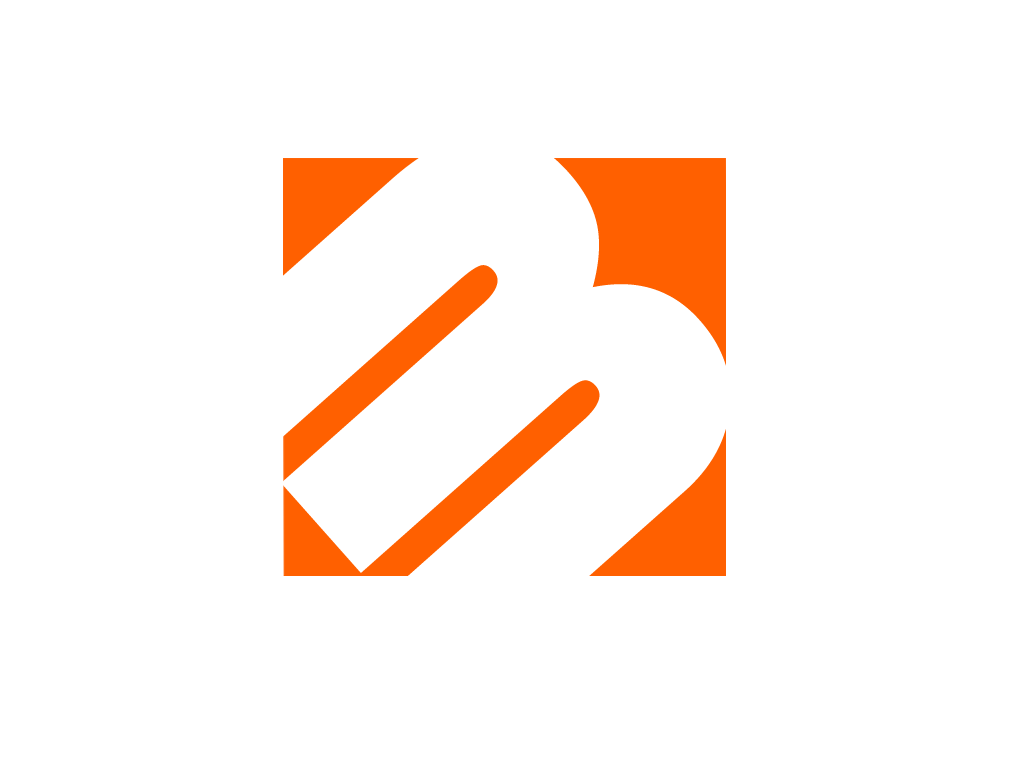
<style>
.page{position:relative;width:1024px;height:768px;background:#ffffff}
.page>*{position:absolute;margin:0}
.t1{font:616.1px "Bauhaus93";color:#ffffff}
</style>
<div class="page">
<p class="t1" style="left:179px;top:133px;width:552px;height:555px;rotate:-132deg">M</p>
</div>
